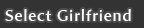
<style>
.page{position:relative;width:144px;height:28px;background:#333333}
.page>*{position:absolute;margin:0}
.t1{font:16px "AmiraParadiso";letter-spacing:0.05em;color:#ffffff}
</style>
<div class="page">
<p class="t1" style="left:5px;top:9px;width:126px;height:12px">Select Girlfriend</p>
</div>
